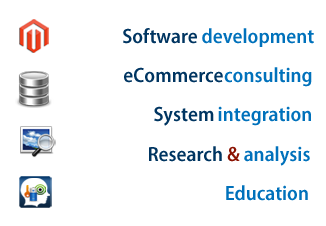
<style>
.page{position:relative;width:326px;height:226px;background:#ffffff}
.page>*{position:absolute;margin:0}
.t1{font:20.8px "MyriadPro-SemiboldSemiCn";color:#003561}
.t2{font:20.8px "MyriadPro-SemiboldSemiCn";color:#0071bb}
.t3{font:20.8px "MyriadPro-SemiboldSemiCn";color:#8b1303}
</style>
<div class="page">
<p class="t1" style="left:123px;top:28px;width:74px;height:16px">Software</p>
<p class="t2" style="left:202px;top:28px;width:112px;height:19px">development</p>
<p class="t1" style="left:124px;top:67px;width:99px;height:16px">eCommerce</p>
<p class="t2" style="left:224px;top:67px;width:88px;height:20px">consulting</p>
<p class="t1" style="left:154px;top:106px;width:60px;height:20px">System</p>
<p class="t2" style="left:218px;top:106px;width:93px;height:20px">integration</p>
<p class="t1" style="left:149px;top:146px;width:91px;height:16px">Research <span class="t3">&amp;</span></p>
<p class="t2" style="left:244px;top:146px;width:66px;height:20px">analysis</p>
<p class="t2" style="left:226px;top:185px;width:82px;height:16px">Education</p>
</div>
